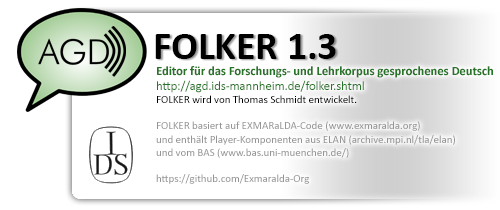
<style>
.page{position:relative;width:500px;height:210px;background:#ffffff}
.page>*{position:absolute;margin:0}
.t1{font:40px "Calibri-Bold";letter-spacing:-0.005em;color:#000000}
.t2{font:11px "Calibri";letter-spacing:-0.005em;color:#959595}
.t3{font:12.7px "Calibri-Bold";letter-spacing:-0.005em;color:#277327}
.t4{font:12.7px "Calibri";letter-spacing:-0.005em;color:#277327}
.t5{font:11px "Calibri";letter-spacing:-0.005em;color:#000000}
.t6{font:9.5px "Calibri";letter-spacing:-0.005em;color:#999999}
</style>
<div class="page">
<p class="t1" style="left:155px;top:34px;width:181px;height:25px">FOLKER 1.3</p>
<p class="t2" style="left:156px;top:66px;width:337px;height:118px"><span class="t3">Editor für das Forschungs- und Lehrkorpus gesprochenes Deutsch  </span><span class="t4">http://agd.ids-mannheim.de/folker.shtml<br></span><span class="t5">FOLKER wird von Thomas Schmidt entwickelt.<br><br></span>FOLKER basiert auf EXMARaLDA-Code (www.exmaralda.org) <br>und enthält Player-Komponenten aus ELAN (archive.mpi.nl/tla/elan) <br>und vom BAS (www.bas.uni-muenchen.de/)<br><br>https://github.com/Exmaralda-Org<br><span class="t6"></span></p>
</div>
